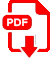
<style>
.page{position:relative;width:50px;height:62px;background:#ffffff}
.page>*{position:absolute;margin:0}
.t1{font:10.9px "ProximaNova-Bold";letter-spacing:0.025em;color:#ffffff}
</style>
<div class="page">
<p class="t1" style="left:7px;top:18px;width:21px;height:9px">PDF</p>
</div>
